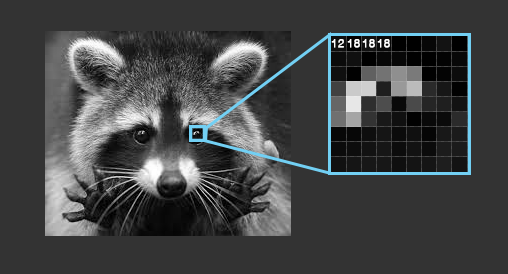
<style>
.page{position:relative;width:508px;height:274px;background:#333333}
.page>*{position:absolute;margin:0}
.t1{font:11.5px "Helvetica-Light";letter-spacing:0.04em;color:#ffffff;font-weight:bold}
</style>
<div class="page">
<p class="t1" style="left:331px;top:39px;width:13px;height:9px">12</p>
<p class="t1" style="left:347px;top:39px;width:13px;height:9px">18</p>
<p class="t1" style="left:362px;top:39px;width:13px;height:9px">18</p>
<p class="t1" style="left:377px;top:39px;width:13px;height:9px">18</p>
</div>
